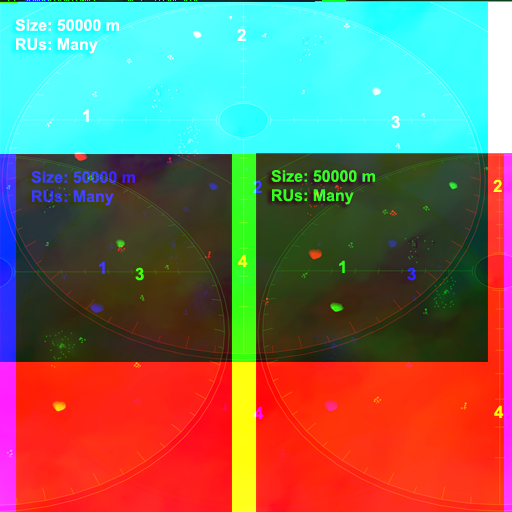
<style>
.page{position:relative;width:512px;height:512px}
.page>*{position:absolute;margin:0}
.t1{font:16px "Arial-BoldMT"}
.t2{font:17px "Arial-BoldMT";color:#ffffff}
.t3{font:17px "Arial-BoldMT"}
</style>
<div class="page">
<p class="t1" style="left:15px;top:17px;width:104px;height:35px">Size: 50000 m<br>RUs: Many</p>
<p class="t2" style="left:83px;top:107px;width:6px;height:13px">1</p>
<p class="t3" style="left:238px;top:252px;width:10px;height:13px">4</p>
</div>
